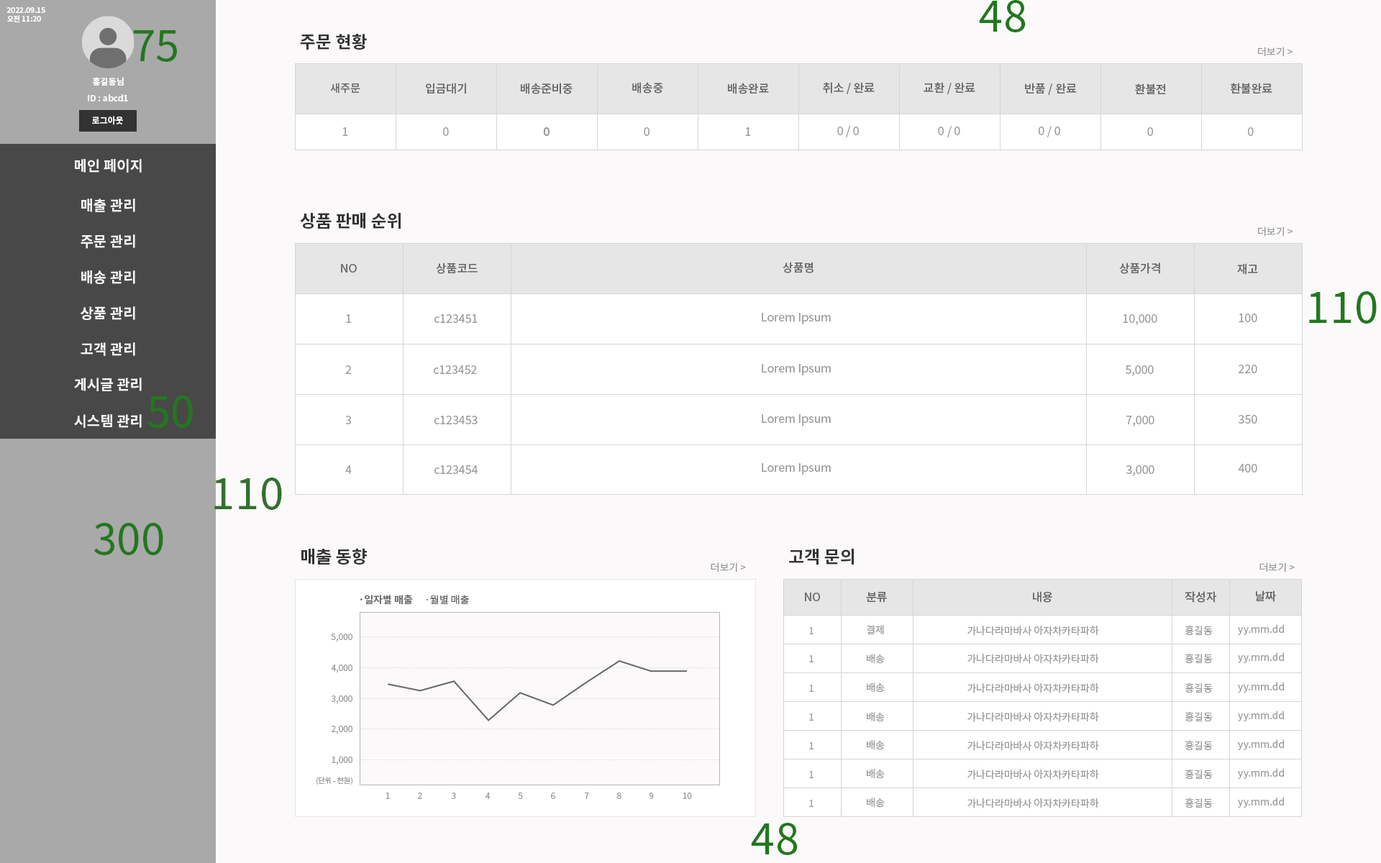
<style>
.page{position:relative;width:1381px;height:863px;background:#fbf9f9}
.page>*{position:absolute;margin:0}
.t1{font:43.2px "NotoSansKR-Regular";letter-spacing:0.01em;color:#21781d}
.t2{font:7.2px "NotoSansKR-Bold";color:#ffffff}
.t3{font:17.3px "NotoSansKR-Bold";color:#333333}
.t4{font:10.1px "NotoSansKR-Regular";color:#999999}
.t5{font:8.6px "NotoSansKR-Bold";color:#ffffff}
.t6{font:10.8px "NotoSansKR-Medium";color:#666666}
.t7{font:11.5px "NotoSansKR-Medium";color:#666666}
.t8{font:11.5px "NotoSansKR-Regular";color:#999999}
.t9{font:11.5px "NotoSansKR-Bold";color:#999999}
.t10{font:14.4px "NotoSansKR-Bold";color:#f5f5f5}
.t11{font:43.2px "NotoSansKR-Regular";letter-spacing:0.01em;color:#32702f}
.t12{font:10.1px "NotoSansKR-Bold";color:#666666}
.t13{font:10.1px "NotoSansKR-Regular";color:#666666}
.t14{font:8.6px "NotoSansKR-Regular";color:#999999}
.t15{font:7.2px "NotoSansKR-Regular";color:#999999}
</style>
<div class="page">
<p class="t1" style="left:979px;top:0px;width:47px;height:32px">48</p>
<p class="t2" style="left:6px;top:7px;width:39px;height:6px">2022.09.15</p>
<p class="t2" style="left:7px;top:15px;width:34px;height:7px">오전 11:20</p>
<p class="t1" style="left:134px;top:30px;width:43px;height:32px">75</p>
<p class="t3" style="left:300px;top:34px;width:67px;height:16px">주문 현황</p>
<p class="t4" style="left:1258px;top:47px;width:35px;height:10px">더보기 &gt;</p>
<p class="t5" style="left:92px;top:77px;width:32px;height:9px">홍길동님</p>
<p class="t6" style="left:330px;top:83px;width:30px;height:11px">새주문</p>
<p class="t7" style="left:426px;top:83px;width:40px;height:11px">입금대기</p>
<p class="t7" style="left:521px;top:83px;width:52px;height:11px">배송준비중</p>
<p class="t7" style="left:632px;top:82px;width:31px;height:12px">배송중</p>
<p class="t7" style="left:728px;top:83px;width:41px;height:11px">배송완료</p>
<p class="t7" style="left:823px;top:82px;width:52px;height:12px">취소 / 완료</p>
<p class="t7" style="left:924px;top:82px;width:52px;height:12px">교환 / 완료</p>
<p class="t7" style="left:1025px;top:83px;width:52px;height:12px">반품 / 완료</p>
<p class="t7" style="left:1135px;top:83px;width:31px;height:11px">환불전</p>
<p class="t7" style="left:1231px;top:83px;width:42px;height:11px">환불완료</p>
<p class="t5" style="left:88px;top:94px;width:40px;height:7px">ID : abcd1</p>
<p class="t5" style="left:92px;top:116px;width:31px;height:9px">로그아웃</p>
<p class="t8" style="left:837px;top:126px;width:22px;height:11px">0 / 0</p>
<p class="t8" style="left:938px;top:126px;width:22px;height:11px">0 / 0</p>
<p class="t8" style="left:1039px;top:126px;width:21px;height:11px">0 / 0</p>
<p class="t8" style="left:342px;top:127px;width:6px;height:9px">1</p>
<p class="t8" style="left:443px;top:127px;width:6px;height:9px">0</p>
<p class="t9" style="left:543px;top:127px;width:7px;height:9px">0</p>
<p class="t8" style="left:644px;top:127px;width:6px;height:9px">0</p>
<p class="t8" style="left:745px;top:127px;width:6px;height:9px">1</p>
<p class="t8" style="left:1147px;top:127px;width:6px;height:9px">0</p>
<p class="t8" style="left:1248px;top:127px;width:6px;height:9px">0</p>
<p class="t10" style="left:75px;top:159px;width:67px;height:14px">메인 페이지</p>
<p class="t10" style="left:81px;top:199px;width:54px;height:13px">매출 관리</p>
<p class="t3" style="left:300px;top:212px;width:101px;height:17px">상품 판매 순위</p>
<p class="t4" style="left:1258px;top:227px;width:35px;height:10px">더보기 &gt;</p>
<p class="t10" style="left:81px;top:235px;width:54px;height:14px">주문 관리</p>
<p class="t7" style="left:341px;top:264px;width:16px;height:9px">NO</p>
<p class="t7" style="left:436px;top:263px;width:42px;height:11px">상품코드</p>
<p class="t7" style="left:783px;top:262px;width:31px;height:11px">상품명</p>
<p class="t7" style="left:1119px;top:263px;width:41px;height:11px">상품가격</p>
<p class="t7" style="left:1237px;top:263px;width:21px;height:12px">재고</p>
<p class="t10" style="left:81px;top:270px;width:54px;height:14px">배송 관리</p>
<p class="t1" style="left:1309px;top:291px;width:68px;height:33px">110</p>
<p class="t10" style="left:81px;top:306px;width:54px;height:14px">상품 관리</p>
<p class="t8" style="left:346px;top:314px;width:6px;height:9px">1</p>
<p class="t8" style="left:435px;top:314px;width:43px;height:9px">c123451</p>
<p class="t8" style="left:762px;top:313px;width:69px;height:11px">Lorem Ipsum</p>
<p class="t8" style="left:1123px;top:314px;width:35px;height:11px">10,000</p>
<p class="t8" style="left:1239px;top:314px;width:19px;height:8px">100</p>
<p class="t10" style="left:81px;top:342px;width:54px;height:14px">고객 관리</p>
<p class="t8" style="left:345px;top:365px;width:7px;height:9px">2</p>
<p class="t8" style="left:434px;top:365px;width:43px;height:9px">c123452</p>
<p class="t8" style="left:762px;top:364px;width:69px;height:12px">Lorem Ipsum</p>
<p class="t8" style="left:1126px;top:365px;width:28px;height:11px">5,000</p>
<p class="t8" style="left:1239px;top:365px;width:19px;height:8px">220</p>
<p class="t10" style="left:74px;top:378px;width:68px;height:13px">게시글 관리</p>
<p class="t1" style="left:147px;top:396px;width:46px;height:32px">50</p>
<p class="t10" style="left:74px;top:414px;width:68px;height:14px">시스템 관리</p>
<p class="t8" style="left:345px;top:416px;width:6px;height:8px">3</p>
<p class="t8" style="left:435px;top:416px;width:43px;height:8px">c123453</p>
<p class="t8" style="left:762px;top:414px;width:69px;height:12px">Lorem Ipsum</p>
<p class="t8" style="left:1126px;top:416px;width:29px;height:11px">7,000</p>
<p class="t8" style="left:1238px;top:415px;width:20px;height:9px">350</p>
<p class="t8" style="left:345px;top:465px;width:7px;height:9px">4</p>
<p class="t8" style="left:435px;top:465px;width:43px;height:9px">c123454</p>
<p class="t8" style="left:762px;top:463px;width:69px;height:12px">Lorem Ipsum</p>
<p class="t8" style="left:1126px;top:465px;width:29px;height:11px">3,000</p>
<p class="t8" style="left:1238px;top:464px;width:20px;height:9px">400</p>
<p class="t11" style="left:214px;top:478px;width:68px;height:32px">110</p>
<p class="t1" style="left:94px;top:523px;width:69px;height:32px">300</p>
<p class="t3" style="left:301px;top:548px;width:66px;height:17px">매출 동향</p>
<p class="t3" style="left:789px;top:549px;width:65px;height:16px">고객 문의</p>
<p class="t4" style="left:711px;top:563px;width:35px;height:10px">더보기 &gt;</p>
<p class="t4" style="left:1260px;top:563px;width:35px;height:10px">더보기 &gt;</p>
<p class="t7" style="left:805px;top:593px;width:15px;height:8px">NO</p>
<p class="t7" style="left:866px;top:592px;width:21px;height:11px">분류</p>
<p class="t7" style="left:1033px;top:591px;width:19px;height:12px">내용</p>
<p class="t7" style="left:1185px;top:591px;width:32px;height:12px">작성자</p>
<p class="t7" style="left:1256px;top:591px;width:20px;height:11px">날짜</p>
<p class="t12" style="left:360px;top:595px;width:53px;height:10px">·일자별 매출</p>
<p class="t13" style="left:426px;top:595px;width:43px;height:10px">·월별 매출</p>
<p class="t4" style="left:809px;top:627px;width:5px;height:8px">1</p>
<p class="t4" style="left:867px;top:625px;width:17px;height:10px">결제</p>
<p class="t4" style="left:968px;top:626px;width:131px;height:10px">가나다라마바사 아자차카타파하</p>
<p class="t4" style="left:1185px;top:625px;width:28px;height:11px">홍길동</p>
<p class="t4" style="left:1238px;top:624px;width:46px;height:11px">yy.mm.dd</p>
<p class="t14" style="left:331px;top:634px;width:22px;height:8px">5,000</p>
<p class="t4" style="left:867px;top:654px;width:18px;height:10px">배송</p>
<p class="t4" style="left:968px;top:654px;width:131px;height:10px">가나다라마바사 아자차카타파하</p>
<p class="t4" style="left:1185px;top:653px;width:28px;height:11px">홍길동</p>
<p class="t4" style="left:1238px;top:653px;width:46px;height:10px">yy.mm.dd</p>
<p class="t14" style="left:331px;top:665px;width:22px;height:8px">4,000</p>
<p class="t4" style="left:809px;top:655px;width:5px;height:8px">1</p>
<p class="t4" style="left:809px;top:685px;width:5px;height:7px">1</p>
<p class="t4" style="left:867px;top:683px;width:18px;height:10px">배송</p>
<p class="t4" style="left:968px;top:683px;width:131px;height:11px">가나다라마바사 아자차카타파하</p>
<p class="t4" style="left:1185px;top:683px;width:28px;height:11px">홍길동</p>
<p class="t4" style="left:1238px;top:682px;width:46px;height:11px">yy.mm.dd</p>
<p class="t14" style="left:332px;top:696px;width:21px;height:8px">3,000</p>
<p class="t4" style="left:809px;top:714px;width:5px;height:7px">1</p>
<p class="t4" style="left:867px;top:712px;width:18px;height:10px">배송</p>
<p class="t4" style="left:968px;top:712px;width:131px;height:10px">가나다라마바사 아자차카타파하</p>
<p class="t4" style="left:1185px;top:711px;width:28px;height:11px">홍길동</p>
<p class="t4" style="left:1238px;top:711px;width:46px;height:11px">yy.mm.dd</p>
<p class="t14" style="left:332px;top:726px;width:21px;height:9px">2,000</p>
<p class="t4" style="left:809px;top:742px;width:5px;height:8px">1</p>
<p class="t4" style="left:867px;top:740px;width:18px;height:10px">배송</p>
<p class="t4" style="left:968px;top:741px;width:131px;height:10px">가나다라마바사 아자차카타파하</p>
<p class="t4" style="left:1185px;top:740px;width:28px;height:11px">홍길동</p>
<p class="t4" style="left:1238px;top:740px;width:46px;height:10px">yy.mm.dd</p>
<p class="t14" style="left:332px;top:757px;width:21px;height:8px">1,000</p>
<p class="t4" style="left:809px;top:771px;width:5px;height:7px">1</p>
<p class="t4" style="left:867px;top:769px;width:18px;height:10px">배송</p>
<p class="t4" style="left:968px;top:770px;width:131px;height:10px">가나다라마바사 아자차카타파하</p>
<p class="t4" style="left:1185px;top:769px;width:28px;height:11px">홍길동</p>
<p class="t4" style="left:1238px;top:768px;width:46px;height:11px">yy.mm.dd</p>
<p class="t15" style="left:317px;top:777px;width:36px;height:8px">(단위 - 천원)</p>
<p class="t14" style="left:386px;top:793px;width:4px;height:6px">1</p>
<p class="t14" style="left:418px;top:793px;width:4px;height:6px">2</p>
<p class="t14" style="left:452px;top:793px;width:4px;height:6px">3</p>
<p class="t14" style="left:485px;top:793px;width:6px;height:6px">4</p>
<p class="t14" style="left:518px;top:793px;width:5px;height:6px">5</p>
<p class="t14" style="left:551px;top:793px;width:4px;height:6px">6</p>
<p class="t14" style="left:584px;top:793px;width:5px;height:6px">7</p>
<p class="t14" style="left:617px;top:793px;width:5px;height:6px">8</p>
<p class="t14" style="left:650px;top:793px;width:4px;height:6px">9</p>
<p class="t14" style="left:683px;top:793px;width:9px;height:6px">10</p>
<p class="t4" style="left:867px;top:798px;width:18px;height:10px">배송</p>
<p class="t4" style="left:1185px;top:798px;width:28px;height:11px">홍길동</p>
<p class="t4" style="left:1238px;top:797px;width:46px;height:11px">yy.mm.dd</p>
<p class="t4" style="left:809px;top:800px;width:5px;height:7px">1</p>
<p class="t4" style="left:968px;top:799px;width:131px;height:10px">가나다라마바사 아자차카타파하</p>
<p class="t1" style="left:751px;top:823px;width:47px;height:32px">48</p>
</div>
